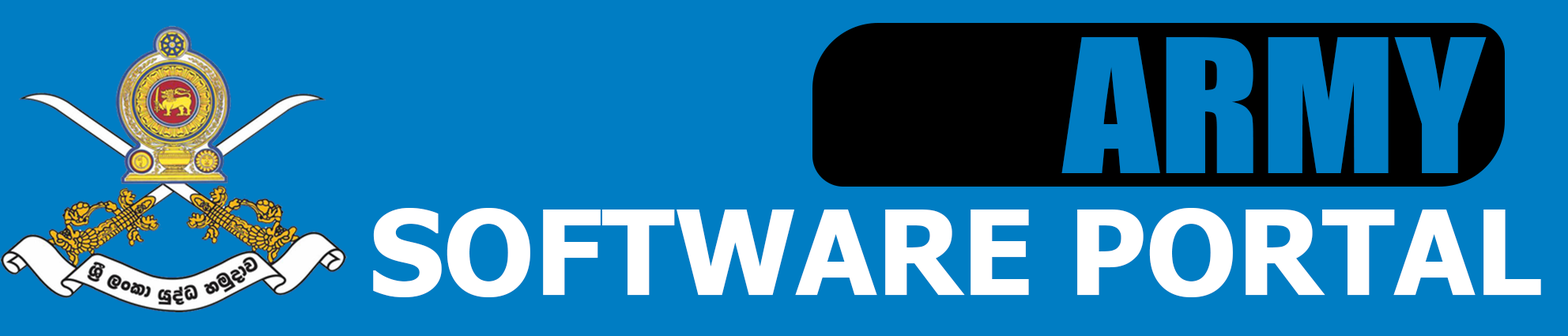
<style>
.page{position:relative;width:1568px;height:336px;background:#007dc3}
.page>*{position:absolute;margin:0}
.t1{font:172.3px "Impact";color:#007dc3;scale:1.1 1}
.t2{font:117.7px "Tahoma-Bold";color:#ffffff}
</style>
<div class="page">
<p class="t1" style="left:1061px;top:37px;width:426px;height:136px">ARMY</p>
<p class="t2" style="left:373px;top:208px;width:1168px;height:89px">SOFTWARE PORTAL</p>
</div>
